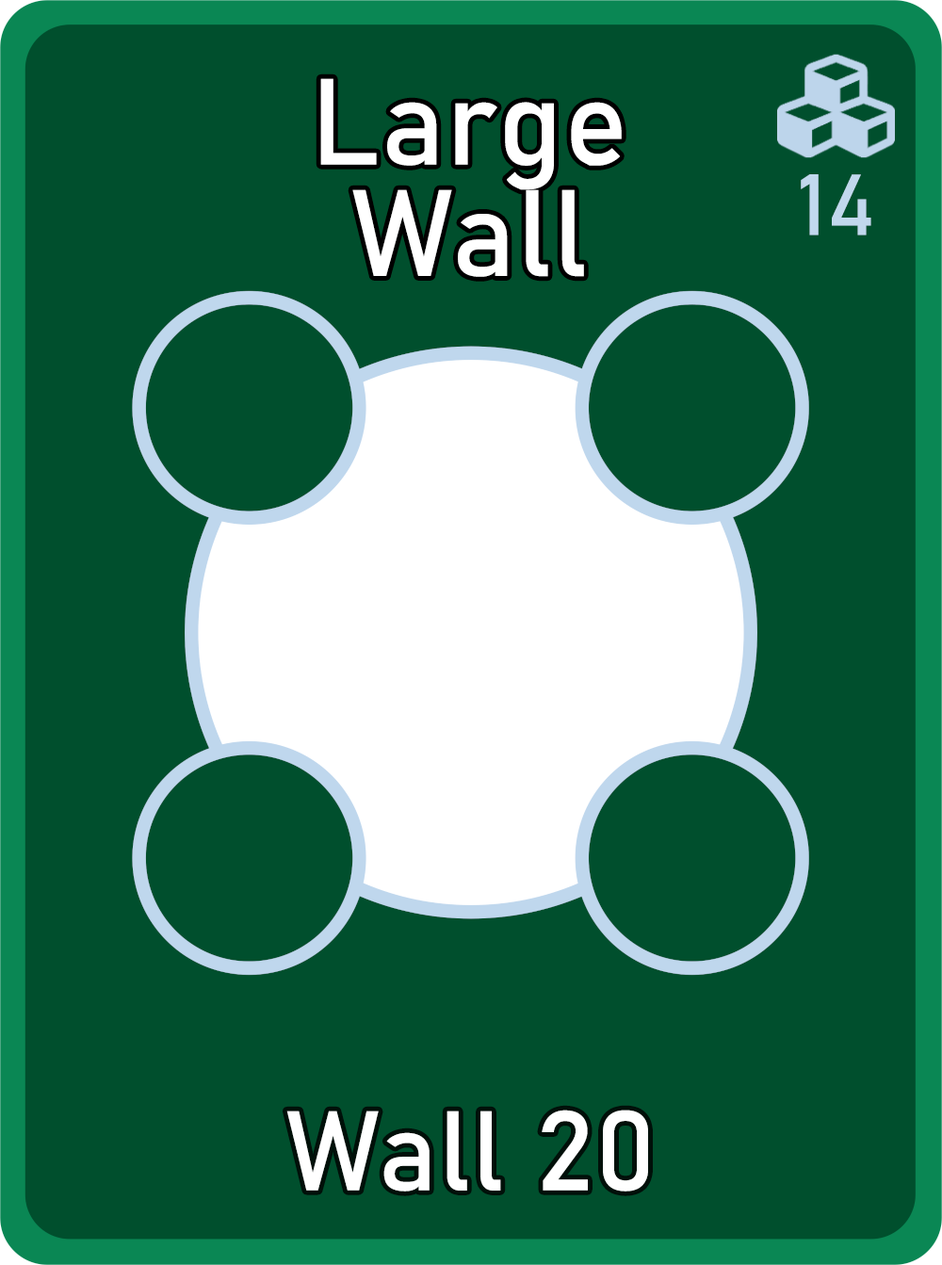
<style>
.page{position:relative;width:942px;height:1265px;background:#004f2d}
.page>*{position:absolute;margin:0}
.t1{font:120.6px/111.3px "Bahnschrift";letter-spacing:0.01em;color:#ffffff}
.t2{font:85px "Bahnschrift";letter-spacing:0.01em;color:#c1d8ed}
.t3{font:111.3px "Bahnschrift";letter-spacing:0.01em;color:#ffffff}
</style>
<div class="page">
<p class="t1" style="left:320px;top:78px;width:302px;height:199px;text-align:center">Large<br>Wall</p>
<p class="t2" style="left:801px;top:174px;width:71px;height:62px">14</p>
<p class="t3" style="left:286px;top:1110px;width:362px;height:82px">Wall 20</p>
</div>
